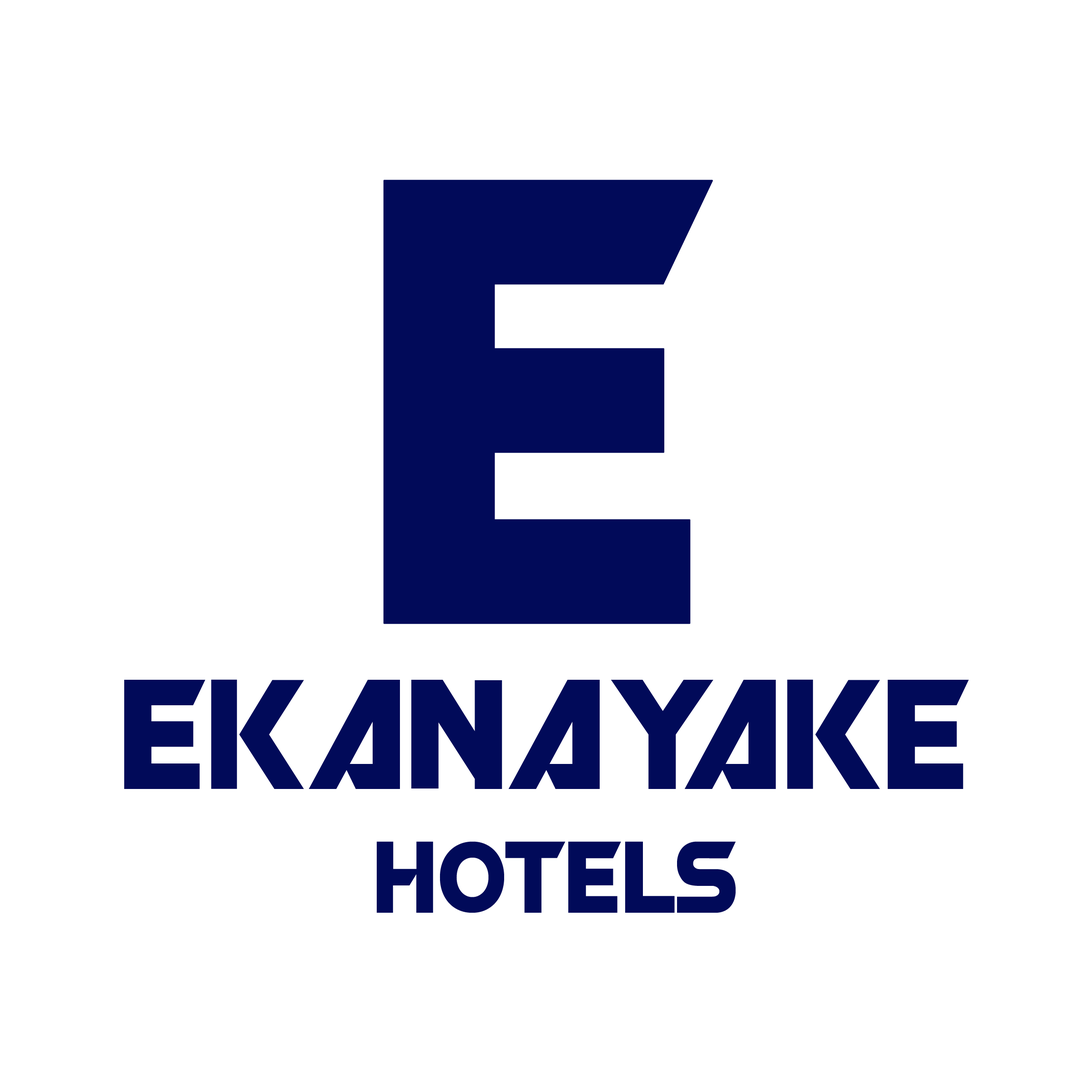
<style>
.page{position:relative;width:1092px;height:1092px;background:#ffffff}
.page>*{position:absolute;margin:0}
.t1{font:553.6px "ROBO";color:#010a59;font-weight:bold}
.t2{font:136.5px "ROBO";color:#010a59}
.t3{font:88.8px "ROBO";color:#010a59}
</style>
<div class="page">
<p class="t1" style="left:383px;top:180px;width:330px;height:444px">e</p>
<p class="t2" style="left:124px;top:679px;width:845px;height:110px">ekanayake</p>
<p class="t3" style="left:377px;top:841px;width:359px;height:72px">Hotels</p>
</div>
